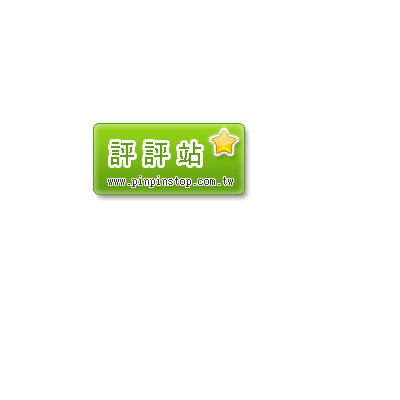
<style>
.page{position:relative;width:400px;height:400px;background:#ffffff}
.page>*{position:absolute;margin:0}
.t1{font:26px "MS-Gothic";color:#5f9d10}
.t2{font:12px "MingLiU";color:#333333}
</style>
<div class="page">
<p class="t1" style="left:111px;top:142px;width:90px;height:23px">評 評 站</p>
<p class="t2" style="left:108px;top:176px;width:125px;height:11px">www.pinpinstop.com.tw</p>
</div>
